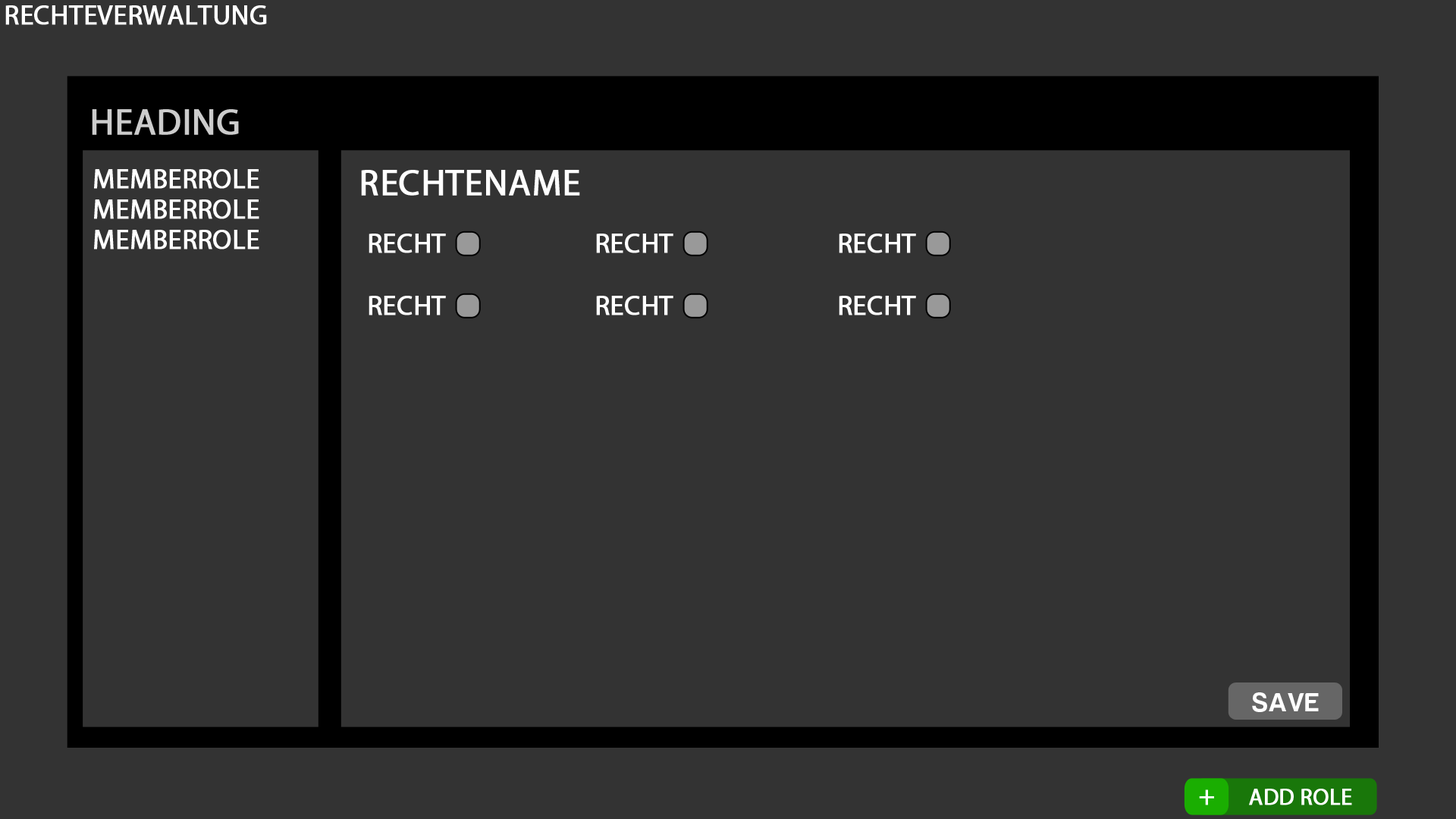
<style>
.page{position:relative;width:1456px;height:819px;background:#333333}
.page>*{position:absolute;margin:0}
.t1{font:27.3px "MyriadPro-Regular";color:#ffffff;text-transform:uppercase;font-weight:bold}
.t2{font:36.4px "MyriadPro-Regular";color:#cccccc;text-transform:uppercase;font-weight:bold}
.t3{font:36.4px "MyriadPro-Regular";color:#ffffff;text-transform:uppercase;font-weight:bold}
.t4{font:26.8px "HarabaraMaisBold-HarabaraMaisBold";color:#ffffff;text-transform:uppercase}
.t5{font:22.7px "MyriadPro-Regular";color:#ffffff;text-transform:uppercase;font-weight:bold}
</style>
<div class="page">
<p class="t1" style="left:5px;top:5px;width:262px;height:20px">Rechteverwaltung</p>
<p class="t2" style="left:92px;top:109px;width:147px;height:26px">Heading</p>
<p class="t1" style="left:94px;top:169px;width:165px;height:20px">Memberrole</p>
<p class="t3" style="left:361px;top:170px;width:219px;height:26px">Rechtename</p>
<p class="t1" style="left:94px;top:199px;width:165px;height:20px">Memberrole</p>
<p class="t1" style="left:94px;top:230px;width:165px;height:19px">Memberrole</p>
<p class="t4" style="left:1252px;top:692px;width:67px;height:20px">Save</p>
<p class="t1" style="left:1199px;top:789px;width:15px;height:16px">+</p>
<p class="t5" style="left:1249px;top:789px;width:103px;height:16px">add Role</p>
</div>
